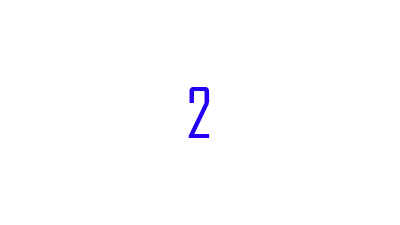
<style>
.page{position:relative;width:400px;height:225px;background:#ffffff}
.page>*{position:absolute;margin:0}
.t1{font:66.7px "AgencyFB-Reg";color:#2200f3}
</style>
<div class="page">
<p class="t1" style="left:188px;top:87px;width:22px;height:51px">2</p>
</div>
